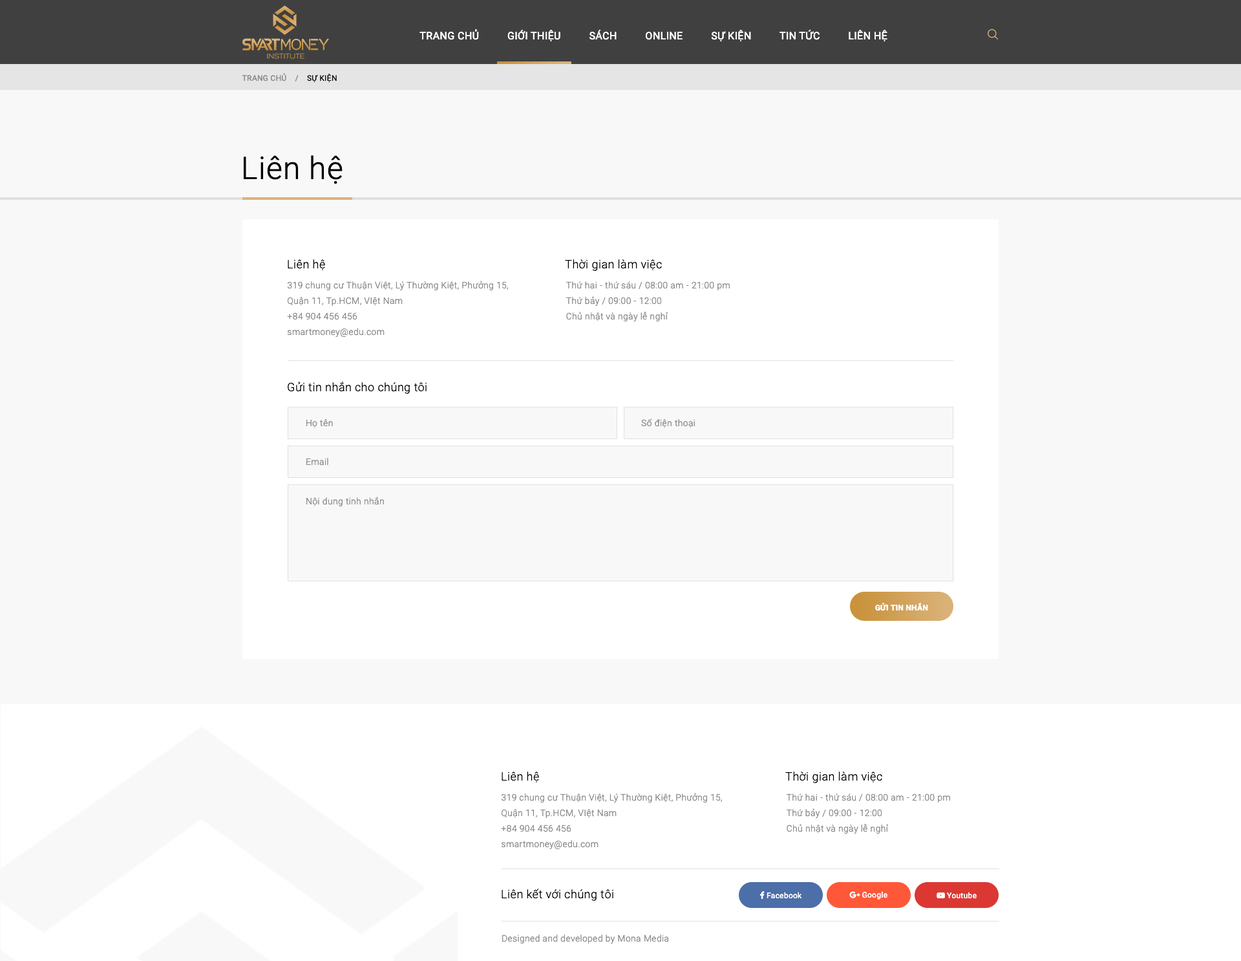
<style>
.page{position:relative;width:1241px;height:961px;background:#f8f8f8}
.page>*{position:absolute;margin:0}
.t1{font:10.3px "Roboto-Regular";letter-spacing:0.025em;color:#ffffff;text-transform:uppercase}
.t2{font:7.8px "Roboto-Regular";letter-spacing:0.025em;color:#898989;text-transform:uppercase}
.t3{font:7.8px "Roboto-Regular";letter-spacing:0.025em;color:#000000;text-transform:uppercase}
.t4{font:31px "Roboto-Light";letter-spacing:0.025em;color:#000000}
.t5{font:11.6px "Roboto-Light";letter-spacing:0.025em;color:#000000}
.t6{font:9.1px/15.5px "Roboto-Light";letter-spacing:0.025em;color:#898989}
.t7{font:9.1px "Roboto-Light";letter-spacing:0.025em;color:#898989}
.t8{font:7.8px "Roboto-Bold";letter-spacing:0.025em;color:#ffffff;text-transform:uppercase}
</style>
<div class="page">
<p class="t1" style="left:420px;top:29px;width:468px;height:12px">Trang chủ          Giới thiệu          Sách          Online          Sự kiện          Tin Tức          Liên hệ</p>
<p class="t2" style="left:242px;top:73px;width:95px;height:10px">Trang chủ    /    <span class="t3">SỰ kiện</span></p>
<p class="t4" style="left:244px;top:155px;width:99px;height:29px">Liên hệ</p>
<p class="t5" style="left:288px;top:259px;width:37px;height:11px">Liên hệ</p>
<p class="t5" style="left:565px;top:259px;width:97px;height:12px">Thời gian làm việc</p>
<p class="t6" style="left:287px;top:281px;width:221px;height:56px">319 chung cư Thuận Việt, Lý Thường Kiệt, Phưởng 15,<br>Quận 11, Tp.HCM, VIệt Nam<br>+84 904 456 456<br>smartmoney@edu.com</p>
<p class="t6" style="left:566px;top:281px;width:164px;height:40px">Thứ hai - thứ sáu / 08:00 am - 21:00 pm<br>Thứ bảy / 09:00 - 12:00<br>Chủ nhật và ngày lễ nghỉ</p>
<p class="t5" style="left:288px;top:381px;width:139px;height:13px">Gửi tin nhắn cho chúng tôi</p>
<p class="t7" style="left:306px;top:419px;width:27px;height:9px">Họ tên</p>
<p class="t7" style="left:641px;top:418px;width:54px;height:10px">Số điện thoại</p>
<p class="t7" style="left:306px;top:458px;width:22px;height:7px">Email</p>
<p class="t7" style="left:306px;top:496px;width:78px;height:10px">Nội dung tinh nhắn</p>
<p class="t8" style="left:875px;top:603px;width:53px;height:8px">Gửi tin nhắn</p>
</div>
